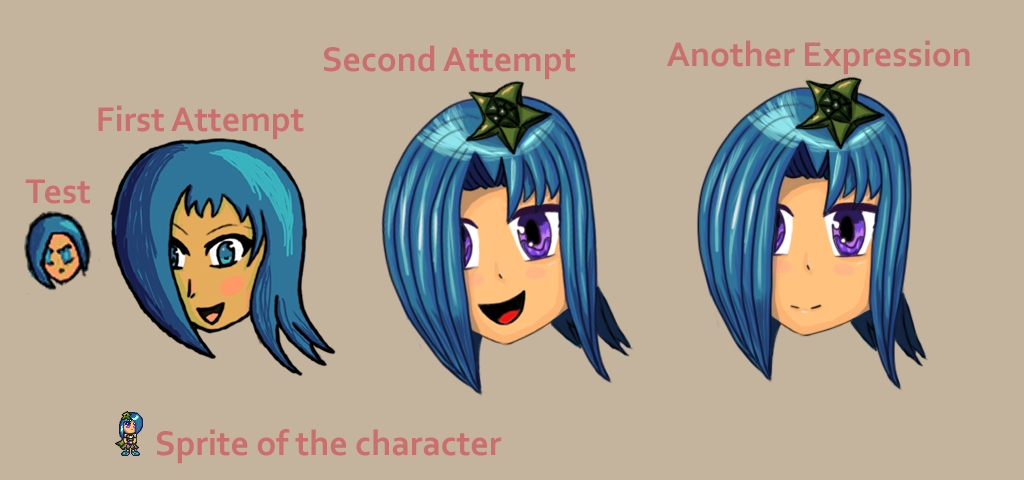
<style>
.page{position:relative;width:1024px;height:480px;background:#c4b49d}
.page>*{position:absolute;margin:0}
.t1{font:36px "Corbel-Bold";color:#ca6f6e}
</style>
<div class="page">
<p class="t1" style="left:667px;top:40px;width:303px;height:35px">Another Expression</p>
<p class="t1" style="left:324px;top:45px;width:252px;height:35px">Second Attempt</p>
<p class="t1" style="left:98px;top:105px;width:206px;height:35px">First Attempt</p>
<p class="t1" style="left:25px;top:179px;width:65px;height:25px">Test</p>
</div>
